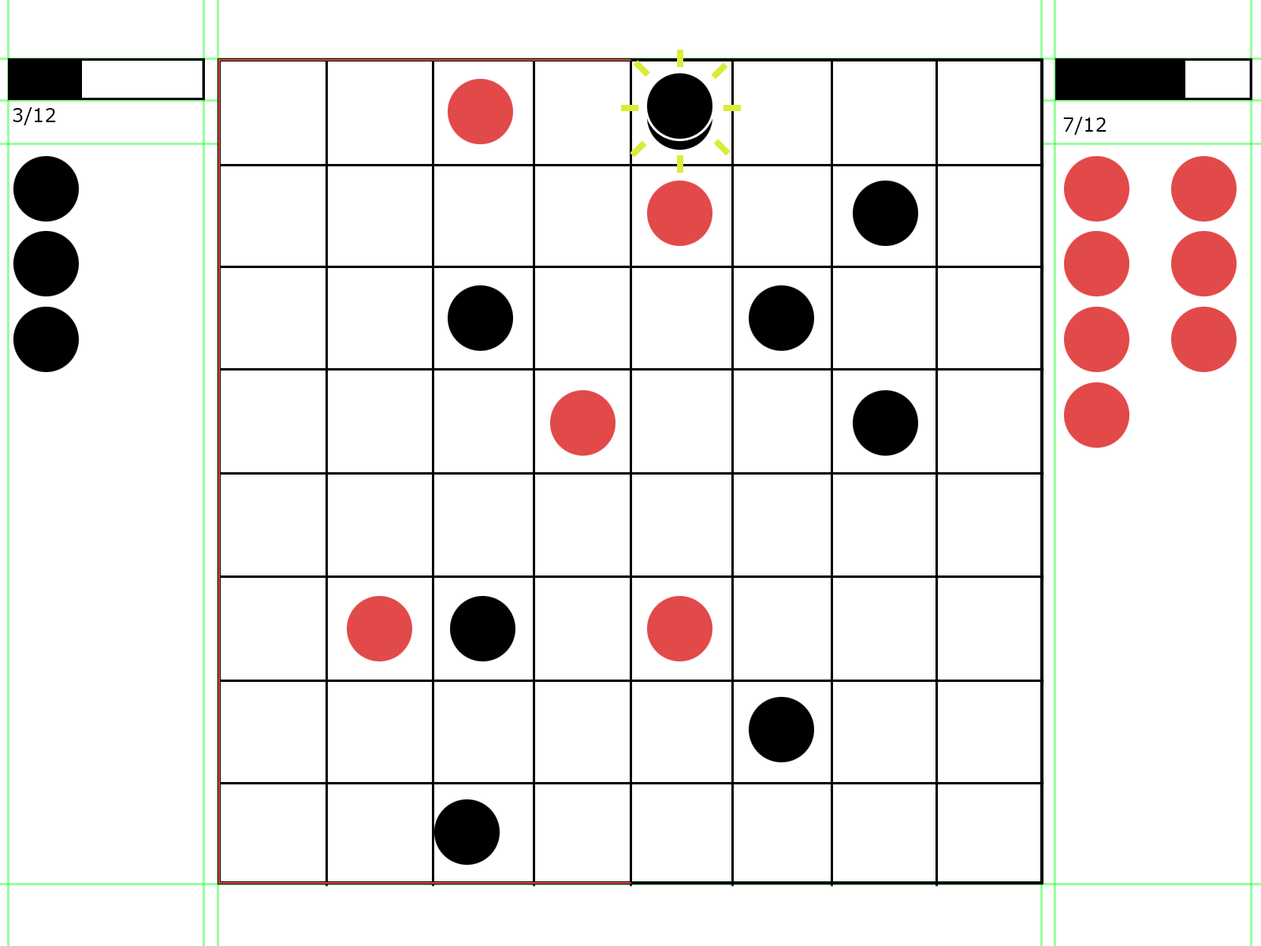
<style>
.page{position:relative;width:1261px;height:946px;background:#ffffff}
.page>*{position:absolute;margin:0}
.t1{font:18.9px "Verdana";color:#000000}
</style>
<div class="page">
<p class="t1" style="left:13px;top:107px;width:43px;height:18px">3/12</p>
<p class="t1" style="left:1063px;top:117px;width:43px;height:18px">7/12</p>
</div>
